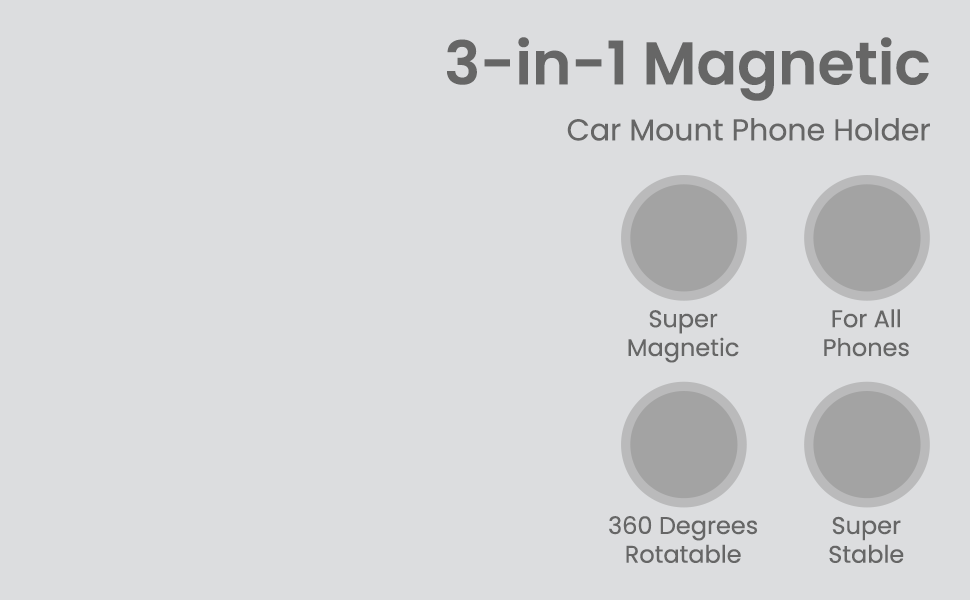
<style>
.page{position:relative;width:970px;height:600px;background:#dcdddf}
.page>*{position:absolute;margin:0}
.t1{font:60px "Poppins-SemiBold";color:#666666}
.t2{font:30px "Poppins-Regular";color:#666666}
.t3{font:24px "Poppins-Regular";color:#666666}
</style>
<div class="page">
<p class="t1" style="left:447px;top:37px;width:482px;height:64px">3-in-1 Magnetic</p>
<p class="t2" style="left:567px;top:118px;width:363px;height:23px">Car Mount Phone Holder</p>
<p class="t3" style="left:628px;top:310px;width:111px;height:53px;text-align:center">Super<br>Magnetic</p>
<p class="t3" style="left:824px;top:309px;width:85px;height:48px;text-align:center">For All<br>Phones</p>
<p class="t3" style="left:609px;top:516px;width:149px;height:47px;text-align:center">360 Degrees<br>Rotatable</p>
<p class="t3" style="left:829px;top:516px;width:75px;height:47px;text-align:center">Super<br>Stable</p>
</div>
